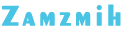
<style>
.page{position:relative;width:122px;height:30px;background:#ffffff}
.page>*{position:absolute;margin:0}
.t1{font:29px "Exotic350BT-Bold";letter-spacing:0.1em;color:#49c4e5;font-weight:bold}
</style>
<div class="page">
<p class="t1" style="left:1px;top:4px;width:120px;height:22px">Zamzmih</p>
</div>
